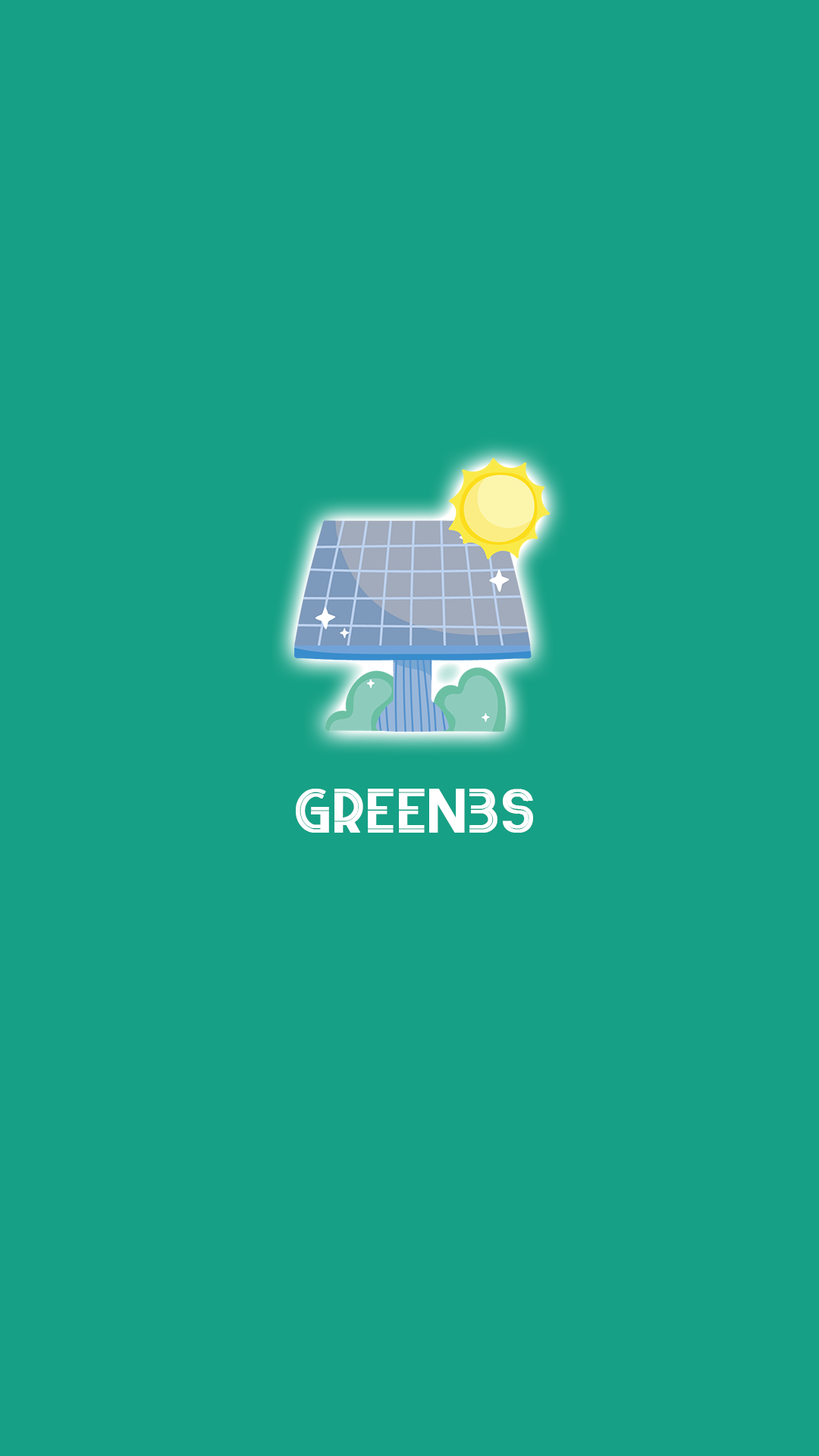
<style>
.page{position:relative;width:819px;height:1456px;background:#16a085}
.page>*{position:absolute;margin:0}
.t1{font:61.6px "WanderBrave";letter-spacing:0.025em;color:#ffffff;font-weight:bold}
</style>
<div class="page">
<p class="t1" style="left:296px;top:789px;width:237px;height:44px">Green3S</p>
</div>
